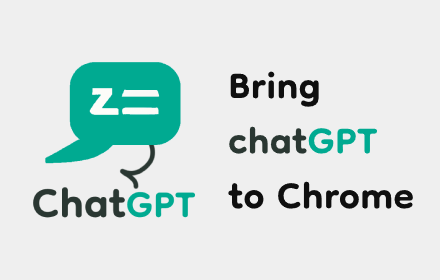
<style>
.page{position:relative;width:440px;height:280px;background:#efefef}
.page>*{position:absolute;margin:0}
.t1{font:60px/55px "Dongle-Bold";color:#0f0f0f}
.t2{font:60px/55px "Dongle-Bold";color:#2a3732}
.t3{font:60px/55px "Dongle-Bold";color:#00aa91}
</style>
<div class="page">
<p class="t1" style="left:228px;top:71px;width:185px;height:138px">Bring <br><span class="t2">chat</span><span class="t3">GPT <br></span>to Chrome</p>
</div>
